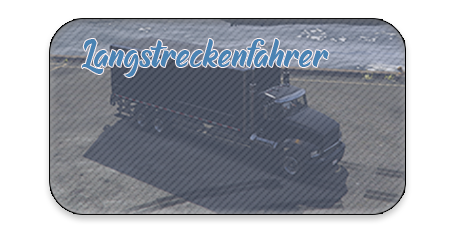
<style>
.page{position:relative;width:457px;height:230px;background:#ffffff}
.page>*{position:absolute;margin:0}
.t1{font:39.6px "RaphtaliaDEMO";color:#4a83b3}
</style>
<div class="page">
<p class="t1" style="left:82px;top:38px;width:247px;height:39px">Langstreckenfahrer</p>
</div>
